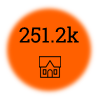
<style>
.page{position:relative;width:100px;height:100px;background:#ff6000}
.page>*{position:absolute;margin:0}
.t1{font:36px "RobotoSlab-Regular";color:#000000}
</style>
<div class="page">
<p class="t1" style="left:19px;top:26px;width:60px;height:17px">251.2k</p>
</div>
